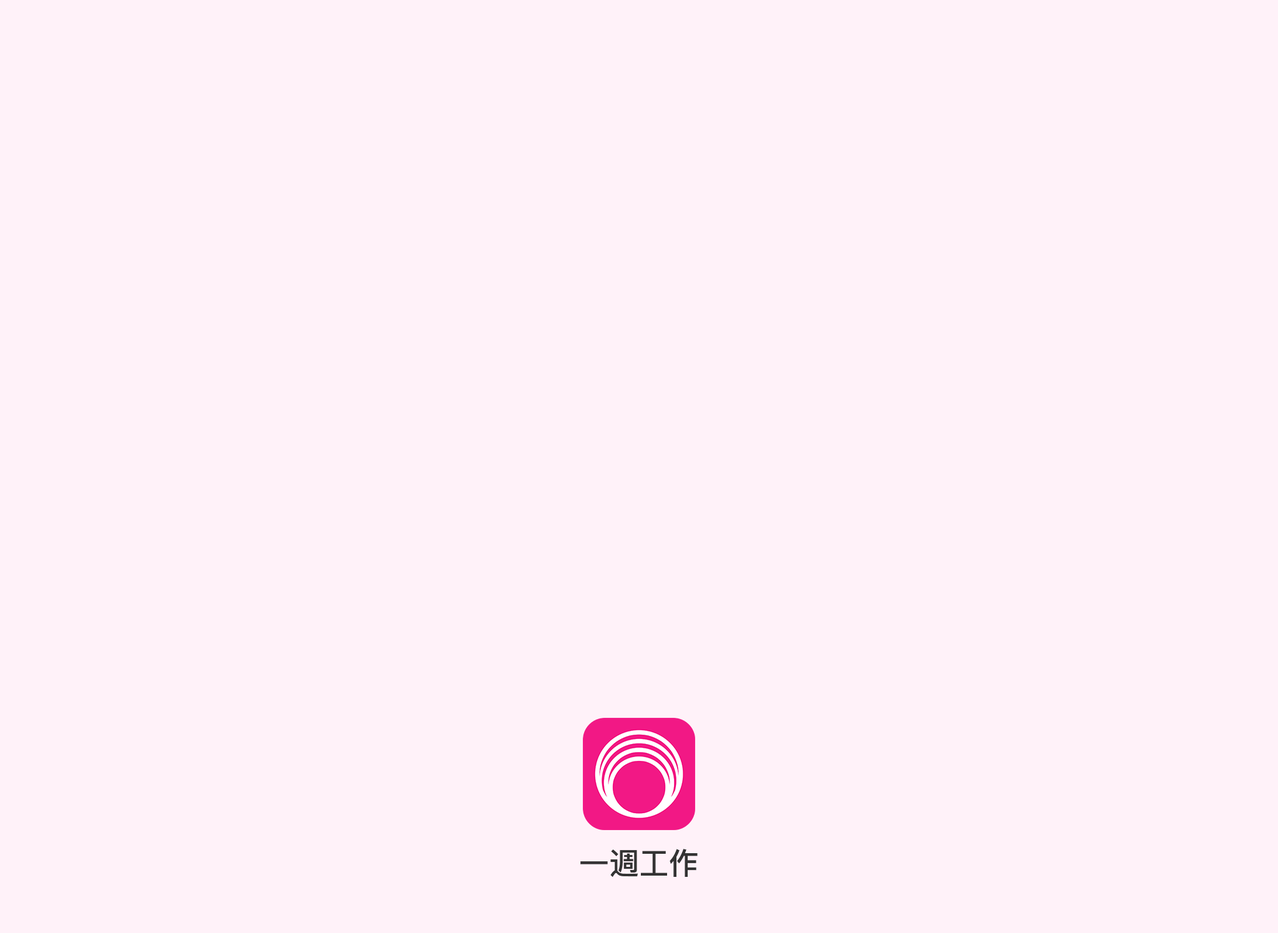
<style>
.page{position:relative;width:1278px;height:933px;background:#fff2f9}
.page>*{position:absolute;margin:0}
.t1{font:29.9px "PingFang-SC-Bold";color:#333333}
</style>
<div class="page">
<p class="t1" style="left:580px;top:849px;width:117px;height:28px">一週工作</p>
</div>
